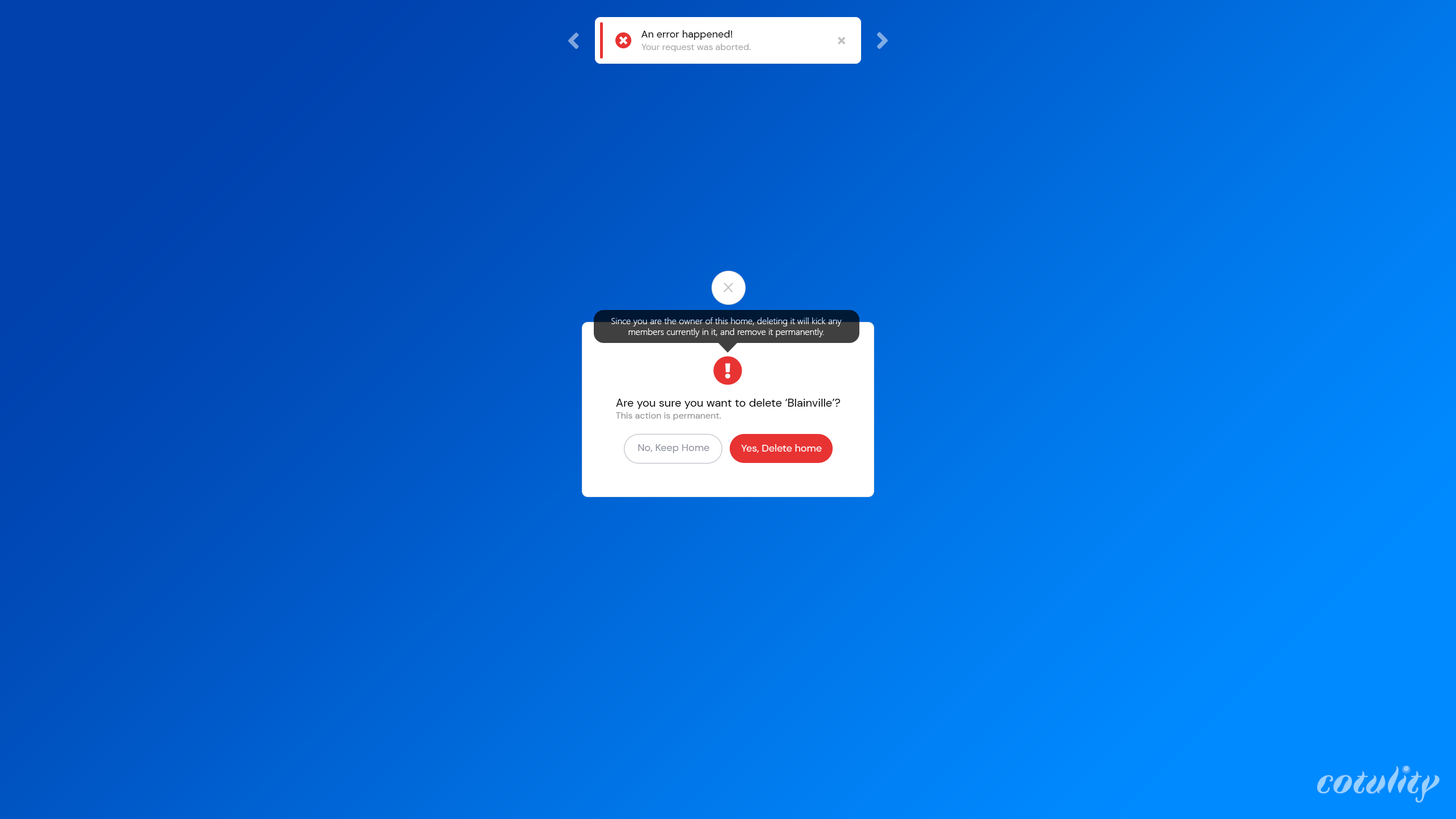
<style>
.page{position:relative;width:1456px;height:819px}
.page>*{position:absolute;margin:0}
.t1{font:10.2px "DMSans-Regular";color:#000000}
.t2{font:9.1px "DMSans-Regular"}
.t3{font:9.1px "DMSans-Regular";color:#a3a3a3}
.t4{font:9.1px "SegoeUI-Light";color:#ffffff}
.t5{font:11.4px "DMSans-Regular";color:#000000}
.t6{font:9.1px "DMSans-Regular";color:#8d8d8d}
.t7{font:10.2px "DMSans-Regular";color:#8c8f9d}
.t8{font:10.2px "DMSans-Regular";color:#ffffff}
.t9{font:36.9px "Faune-DisplayBoldItalic";color:#99d0ff}
.t10{font:16.6px "Faune-DisplayBlack"}
</style>
<div class="page">
<p class="t1" style="left:641px;top:30px;width:92px;height:10px">An error happened!</p>
<p class="t2" style="left:642px;top:44px;width:120px;height:8px">Your request was processed.</p>
<p class="t3" style="left:642px;top:44px;width:109px;height:8px">Your request was aborted.</p>
<p class="t4" style="left:611px;top:317px;width:231px;height:20px;text-align:center">Since you are the owner of this home, deleting it will kick any members currently in it, and remove it permanently.</p>
<p class="t5" style="left:616px;top:399px;width:224px;height:10px">Are you sure you want to delete ‘Blainville’?</p>
<p class="t6" style="left:615px;top:412px;width:106px;height:8px">This action is permanent.</p>
<p class="t7" style="left:638px;top:444px;width:71px;height:9px">No, Keep Home</p>
<p class="t8" style="left:741px;top:444px;width:81px;height:9px">Yes, Delete home</p>
<p class="t9" style="left:1317px;top:766px;width:122px;height:36px">cotulity</p>
<p class="t10" style="left:1402px;top:765px;width:8px;height:8px;rotate:90deg">o</p>
<p class="t9" style="left:1407px;top:771px;width:14px;height:22px">t</p>
<p class="t9" style="left:1333px;top:775px;width:18px;height:18px">o</p>
<p class="t9" style="left:1367px;top:776px;width:19px;height:18px">u</p>
</div>
